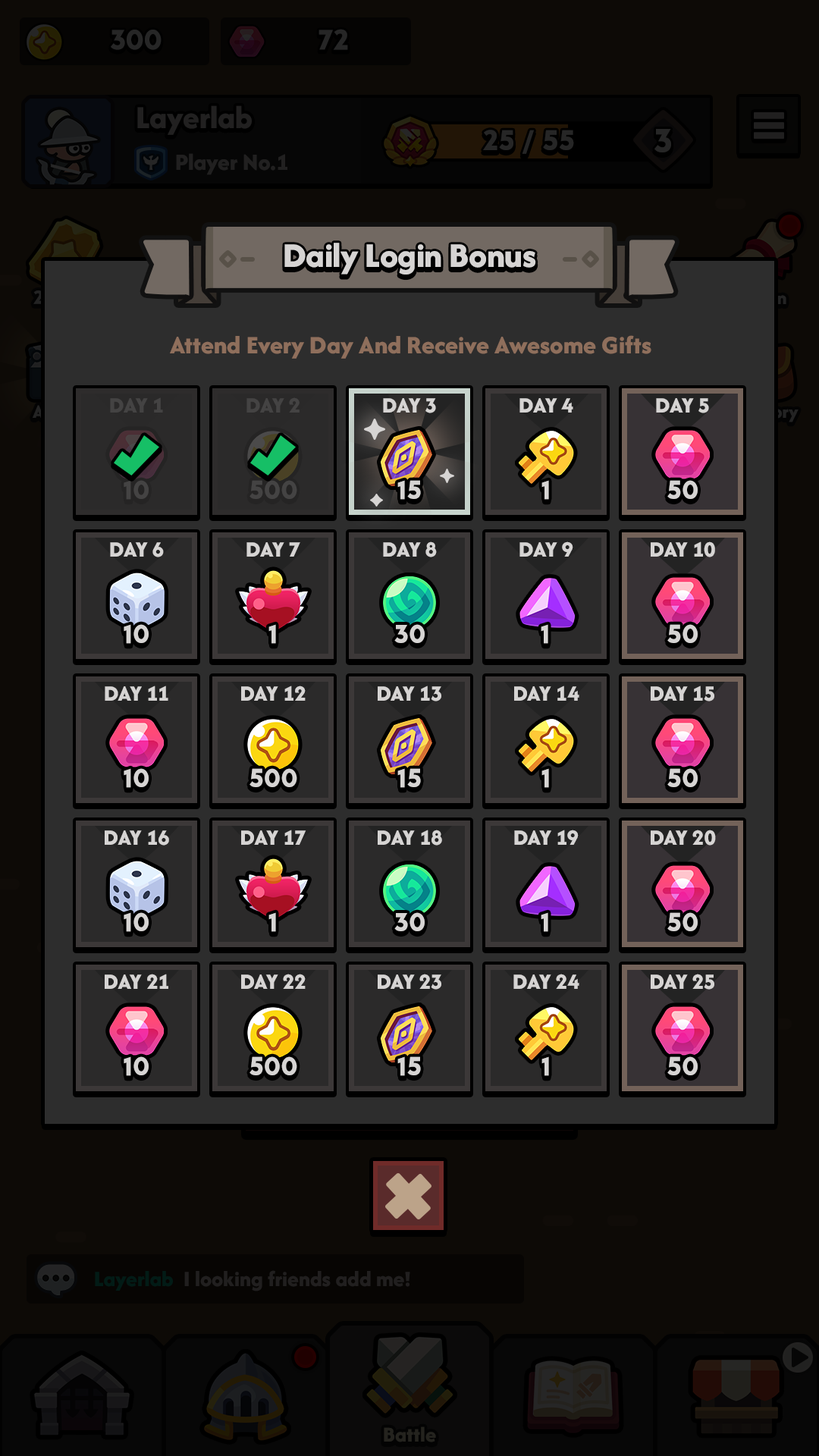
<style>
.page{position:relative;width:819px;height:1456px;background:#0d0a06}
.page>*{position:absolute;margin:0}
.t1{font:36px "AfacadFlux-ExtraBold";letter-spacing:-0.01em;color:#d6d4d3}
.t2{font:26.2px "AfacadFlux-ExtraBold";color:#8f6f5c}
.t3{font:22.7px "AfacadFlux-ExtraBold";color:#444343;text-transform:uppercase}
.t4{font:22.7px "AfacadFlux-ExtraBold";color:#d6d4d3;text-transform:uppercase}
.t5{font:27.3px "LTAvocado-Bold";color:#444343}
.t6{font:27.3px "LTAvocado-Bold";color:#d6d4d3}
</style>
<div class="page">
<p class="t1" style="left:284px;top:243px;width:252px;height:32px">Daily Login Bonus</p>
<p class="t2" style="left:170px;top:335px;width:481px;height:24px">Attend Every Day And Receive Awesome Gifts</p>
<p class="t3" style="left:110px;top:397px;width:53px;height:16px">Day 1</p>
<p class="t3" style="left:246px;top:397px;width:54px;height:16px">Day 2</p>
<p class="t4" style="left:383px;top:398px;width:53px;height:15px">Day 3</p>
<p class="t4" style="left:519px;top:398px;width:54px;height:15px">Day 4</p>
<p class="t4" style="left:656px;top:398px;width:53px;height:15px">Day 5</p>
<p class="t5" style="left:124px;top:480px;width:25px;height:20px">10</p>
<p class="t5" style="left:249px;top:480px;width:48px;height:19px">500</p>
<p class="t6" style="left:397px;top:480px;width:24px;height:20px">15</p>
<p class="t6" style="left:541px;top:480px;width:8px;height:20px">1</p>
<p class="t6" style="left:667px;top:480px;width:31px;height:19px">50</p>
<p class="t4" style="left:110px;top:542px;width:54px;height:15px">Day 6</p>
<p class="t4" style="left:246px;top:542px;width:54px;height:15px">Day 7</p>
<p class="t4" style="left:383px;top:541px;width:54px;height:16px">Day 8</p>
<p class="t4" style="left:519px;top:541px;width:54px;height:16px">Day 9</p>
<p class="t4" style="left:651px;top:541px;width:64px;height:16px">Day 10</p>
<p class="t6" style="left:124px;top:624px;width:25px;height:20px">10</p>
<p class="t6" style="left:268px;top:624px;width:8px;height:20px">1</p>
<p class="t6" style="left:394px;top:624px;width:31px;height:19px">30</p>
<p class="t6" style="left:541px;top:624px;width:7px;height:20px">1</p>
<p class="t6" style="left:667px;top:624px;width:31px;height:19px">50</p>
<p class="t4" style="left:105px;top:686px;width:63px;height:15px">Day 11</p>
<p class="t4" style="left:241px;top:686px;width:65px;height:15px">Day 12</p>
<p class="t4" style="left:378px;top:686px;width:63px;height:15px">Day 13</p>
<p class="t4" style="left:514px;top:686px;width:65px;height:15px">Day 14</p>
<p class="t4" style="left:651px;top:686px;width:63px;height:15px">Day 15</p>
<p class="t6" style="left:124px;top:768px;width:25px;height:20px">10</p>
<p class="t6" style="left:249px;top:768px;width:48px;height:19px">500</p>
<p class="t6" style="left:397px;top:768px;width:24px;height:20px">15</p>
<p class="t6" style="left:541px;top:768px;width:8px;height:20px">1</p>
<p class="t6" style="left:667px;top:768px;width:31px;height:19px">50</p>
<p class="t4" style="left:105px;top:830px;width:64px;height:16px">Day 16</p>
<p class="t4" style="left:241px;top:830px;width:65px;height:15px">Day 17</p>
<p class="t4" style="left:378px;top:830px;width:64px;height:16px">Day 18</p>
<p class="t4" style="left:514px;top:830px;width:65px;height:15px">Day 19</p>
<p class="t4" style="left:651px;top:830px;width:65px;height:16px">Day 20</p>
<p class="t6" style="left:124px;top:912px;width:25px;height:20px">10</p>
<p class="t6" style="left:268px;top:912px;width:8px;height:20px">1</p>
<p class="t6" style="left:394px;top:912px;width:31px;height:19px">30</p>
<p class="t6" style="left:541px;top:912px;width:7px;height:20px">1</p>
<p class="t6" style="left:667px;top:912px;width:31px;height:19px">50</p>
<p class="t4" style="left:105px;top:974px;width:63px;height:15px">Day 21</p>
<p class="t4" style="left:241px;top:974px;width:65px;height:15px">Day 22</p>
<p class="t4" style="left:378px;top:974px;width:63px;height:16px">Day 23</p>
<p class="t4" style="left:513px;top:974px;width:66px;height:15px">Day 24</p>
<p class="t4" style="left:651px;top:974px;width:63px;height:16px">Day 25</p>
<p class="t6" style="left:124px;top:1056px;width:25px;height:20px">10</p>
<p class="t6" style="left:249px;top:1056px;width:48px;height:19px">500</p>
<p class="t6" style="left:397px;top:1056px;width:24px;height:20px">15</p>
<p class="t6" style="left:541px;top:1056px;width:8px;height:20px">1</p>
<p class="t6" style="left:667px;top:1056px;width:31px;height:19px">50</p>
</div>
